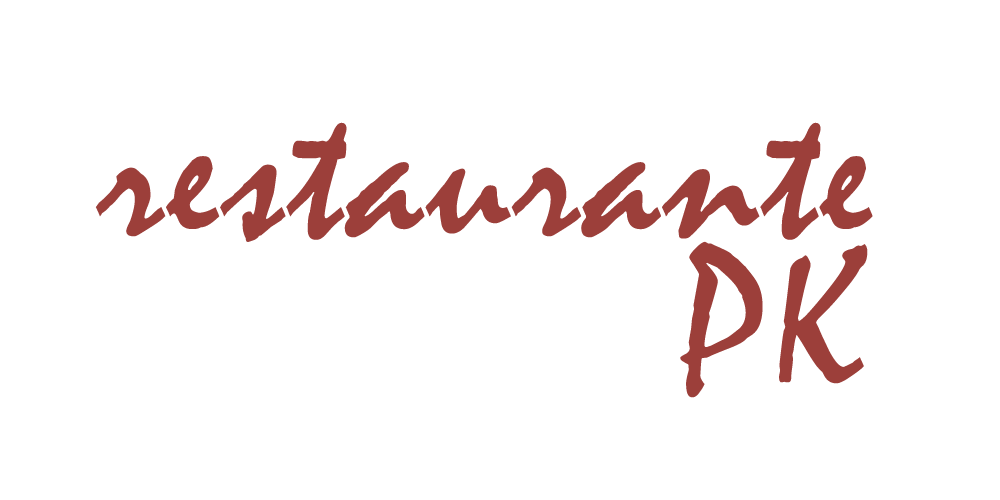
<style>
.page{position:relative;width:1000px;height:500px;background:#ffffff}
.page>*{position:absolute;margin:0}
.t1{font:200px/150px "Mistral";letter-spacing:0.025em;color:#9c3f3a}
</style>
<div class="page">
<p class="t1" style="left:95px;top:122px;width:778px;height:276px">restaurante<br>              PK</p>
</div>
